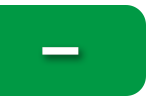
<style>
.page{position:relative;width:150px;height:100px;background:#009944}
.page>*{position:absolute;margin:0}
.t1{font:125px "DengXian";letter-spacing:0.01em;color:#ffffff}
</style>
<div class="page">
<p class="t1" style="left:42px;top:47px;width:37px;height:8px">-</p>
</div>
